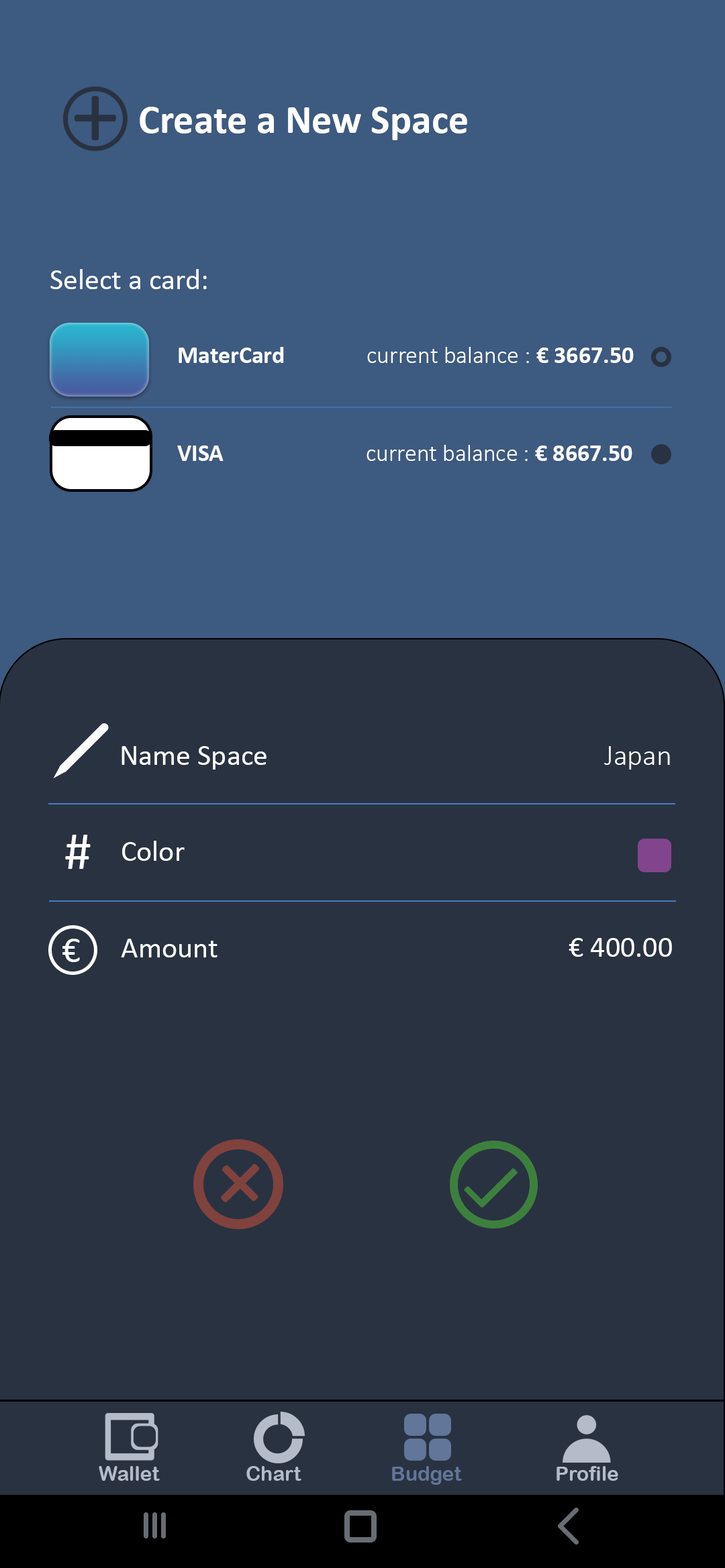
<style>
.page{position:relative;width:725px;height:1568px;background:#293241}
.page>*{position:absolute;margin:0}
.t1{font:96.5px "Calibri";color:#293241}
.t2{font:40.3px "Calibri-Bold";color:#ffffff}
.t3{font:29.5px "Calibri";color:#ffffff}
.t4{font:24.2px "Calibri-Light";color:#ffffff}
.t5{font:24.2px "Calibri-Bold";color:#ffffff}
.t6{font:29.5px "Calibri-Light";color:#ffffff}
.t7{font:53.7px "Calibri";color:#ffffff}
.t8{font:36.9px "Calibri";color:#ffffff}
.t9{font:106.7px "Calibri";color:#80423d}
.t10{font:80px "Calibri";color:#3d803d}
.t11{font:20.1px "ArialRoundedMTBold";color:#b4bcc9}
.t12{font:20.1px "ArialRoundedMTBold";color:#617698}
</style>
<div class="page">
<p class="t1" style="left:74px;top:96px;width:42px;height:44px">+</p>
<p class="t2" style="left:140px;top:107px;width:327px;height:33px">Create a New Space</p>
<p class="t3" style="left:50px;top:269px;width:157px;height:20px">Select a card:</p>
<p class="t4" style="left:178px;top:347px;width:455px;height:16px"><span class="t5">MaterCard               </span>current balance : <span class="t5">€ 3667.50</span></p>
<p class="t4" style="left:177px;top:445px;width:455px;height:16px"><span class="t5">VISA                          </span>current balance : <span class="t5">€ 8667.50</span></p>
<p class="t3" style="left:121px;top:746px;width:145px;height:24px">Name Space</p>
<p class="t6" style="left:604px;top:746px;width:66px;height:24px">Japan</p>
<p class="t7" style="left:65px;top:835px;width:26px;height:34px">#</p>
<p class="t3" style="left:122px;top:841px;width:63px;height:20px">Color</p>
<p class="t8" style="left:62px;top:939px;width:18px;height:23px">€</p>
<p class="t3" style="left:121px;top:939px;width:96px;height:18px">Amount</p>
<p class="t3" style="left:568px;top:938px;width:104px;height:19px">€ 400.00</p>
<p class="t9" style="left:221px;top:1163px;width:39px;height:39px;rotate:45deg">+</p>
<p class="t10" style="left:464px;top:1168px;width:53px;height:40px;rotate:-135deg">L</p>
<p class="t11" style="left:99px;top:1466px;width:61px;height:15px">Wallet</p>
<p class="t11" style="left:246px;top:1466px;width:55px;height:15px">Chart</p>
<p class="t12" style="left:392px;top:1466px;width:70px;height:19px">Budget</p>
<p class="t11" style="left:556px;top:1466px;width:62px;height:15px">Profile</p>
</div>
